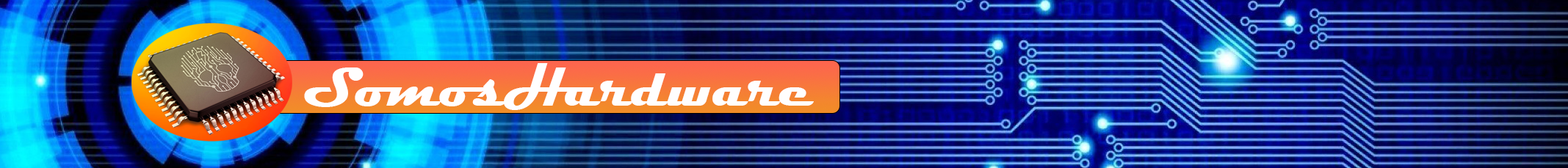
<style>
.page{position:relative;width:1568px;height:168px}
.page>*{position:absolute;margin:0}
.t1{font:55.1px "Magneto-Bold";color:#fffefe}
</style>
<div class="page">
<p class="t1" style="left:304px;top:63px;width:510px;height:47px">SomosHardware</p>
</div>
